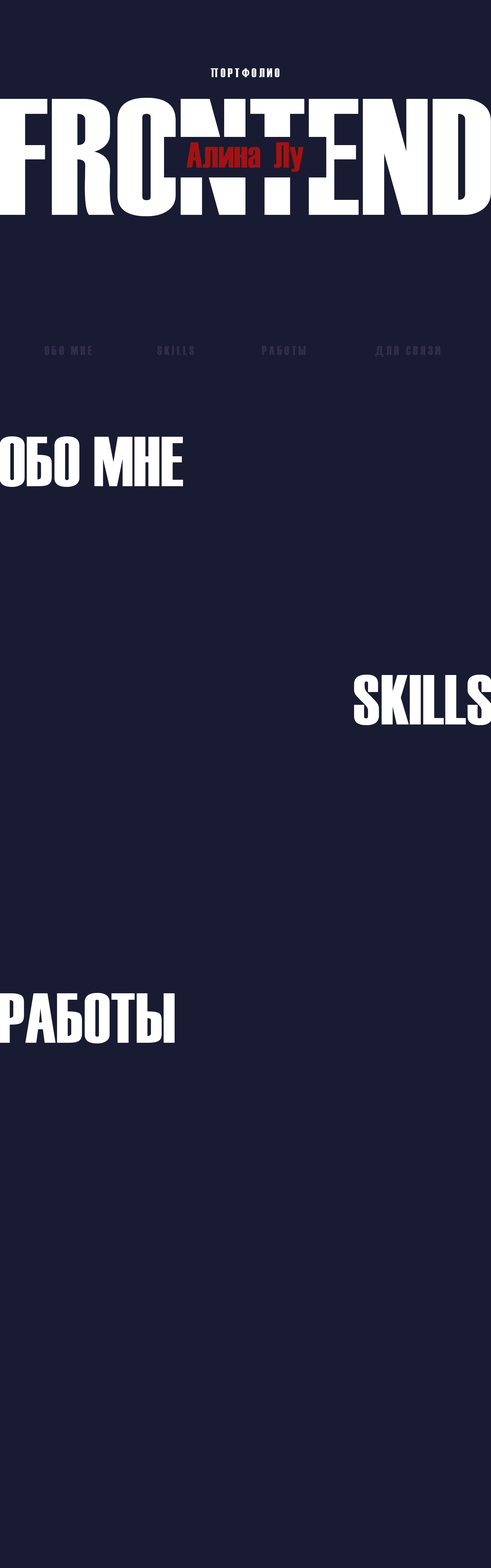
<style>
.page{position:relative;width:491px;height:1568px;background:#191b32}
.page>*{position:absolute;margin:0}
.t1{font:13px "Haettenschweiler";color:#ffffff}
.t2{font:165.3px "Haettenschweiler";color:#ffffff}
.t3{font:36.3px "Haettenschweiler";color:#a31212}
.t4{font:13px "Haettenschweiler";color:#302f4a}
.t5{font:70.9px "Haettenschweiler";color:#ffffff}
</style>
<div class="page">
<p class="t1" style="left:211px;top:68px;width:69px;height:9px">П О Р Т Ф О Л И О</p>
<p class="t2" style="left:0px;top:98px;width:491px;height:118px">FRONTEND</p>
<p class="t3" style="left:186px;top:142px;width:117px;height:30px">Алина  Лу</p>
<p class="t4" style="left:44px;top:346px;width:48px;height:9px">О Б О   М Н Е</p>
<p class="t4" style="left:157px;top:346px;width:37px;height:9px">S K I L L S</p>
<p class="t4" style="left:262px;top:346px;width:43px;height:9px">Р А Б О Т Ы</p>
<p class="t4" style="left:375px;top:346px;width:65px;height:11px">Д Л Я   С В Я З И</p>
<p class="t5" style="left:0px;top:436px;width:183px;height:51px">ОБО МНЕ</p>
</div>
